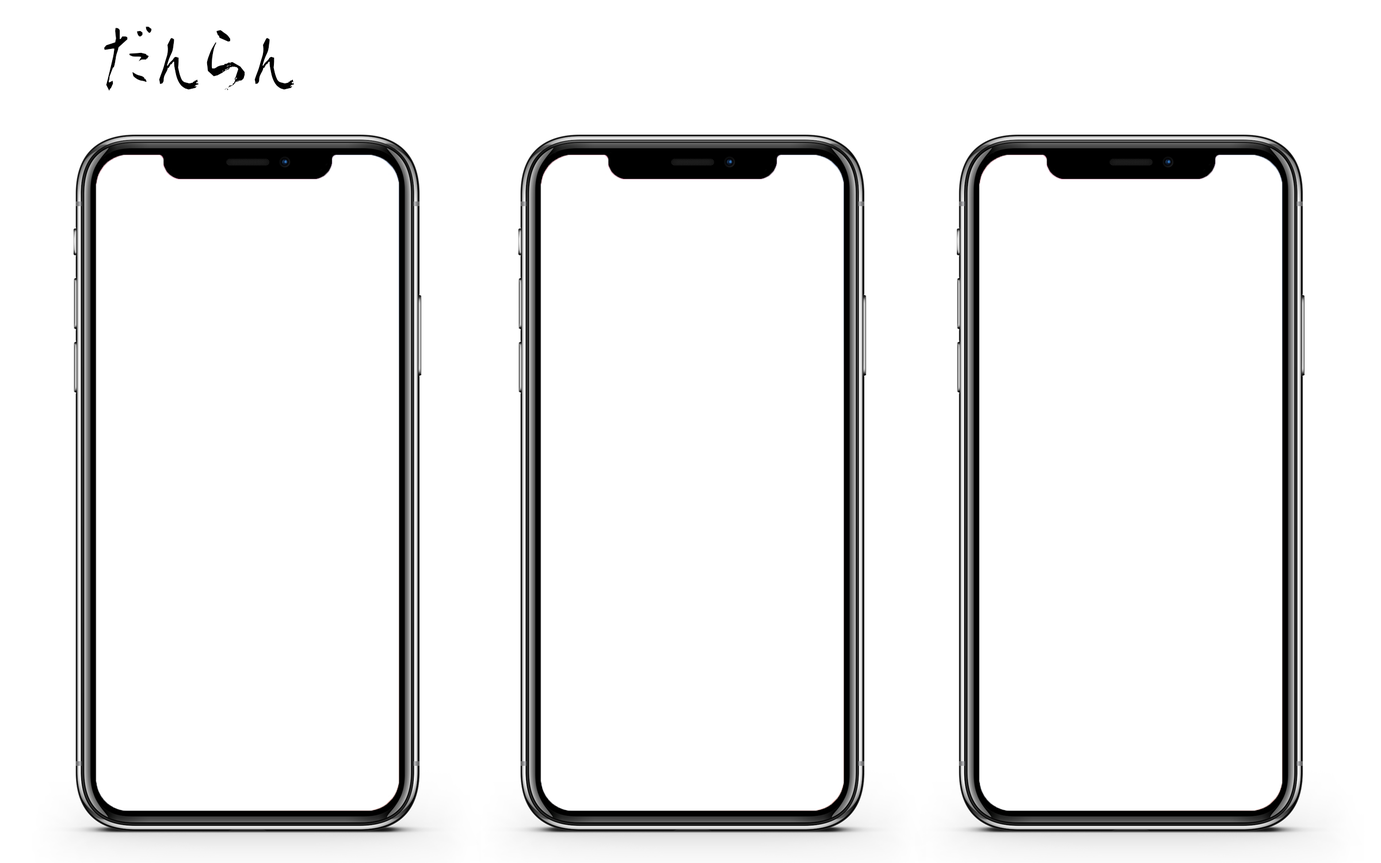
<style>
.page{position:relative;width:1381px;height:863px;background:#ffffff}
.page>*{position:absolute;margin:0}
.t1{font:76.7px "aoyagireisyosimo2";color:#000000}
</style>
<div class="page">
<p class="t1" style="left:104px;top:26px;width:190px;height:65px">だんらん</p>
</div>
